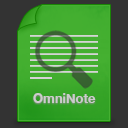
<style>
.page{position:relative;width:128px;height:128px;background:#333333}
.page>*{position:absolute;margin:0}
.t1{font:13px "HelveticaNeue-Bold";color:#cccccc}
</style>
<div class="page">
<p class="t1" style="left:33px;top:93px;width:63px;height:10px">OmniNote</p>
</div>
